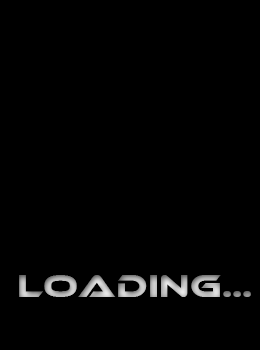
<style>
.page{position:relative;width:260px;height:350px;background:#000000}
.page>*{position:absolute;margin:0}
.t1{font:33.3px "EthnocentricRg-Regular";color:#ffffff}
</style>
<div class="page">
<p class="t1" style="left:19px;top:275px;width:232px;height:22px">Loading...</p>
</div>
